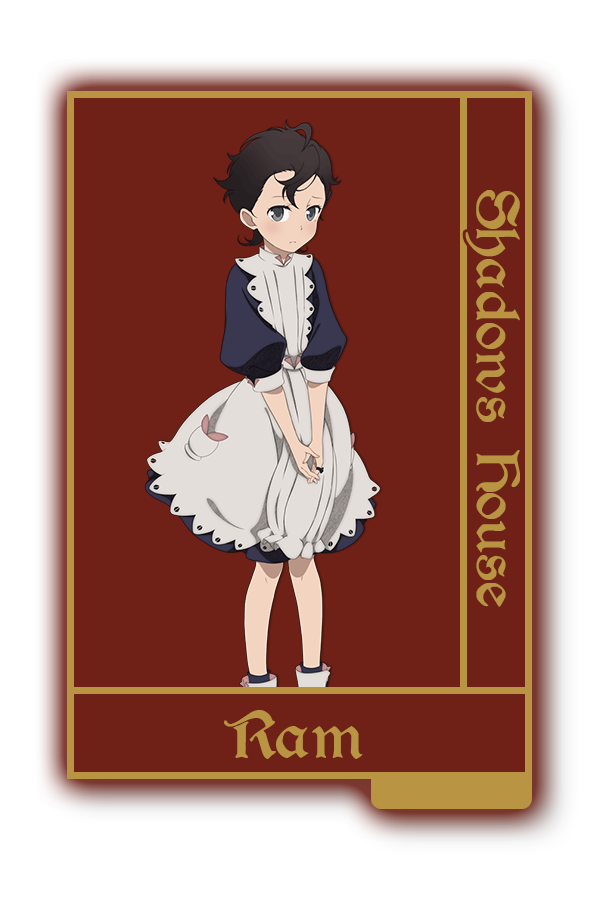
<style>
.page{position:relative;width:600px;height:900px;background:#6f2117}
.page>*{position:absolute;margin:0}
.t1{font:67.9px "Augusta-Regular";color:#b89443}
.t2{font:75px "Augusta-Regular";color:#b89443}
</style>
<div class="page">
<p class="t1" style="left:465px;top:190px;width:55px;height:417px;rotate:90deg">Shadows House</p>
<p class="t2" style="left:224px;top:710px;width:139px;height:49px">Ram</p>
</div>
